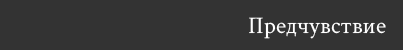
<style>
.page{position:relative;width:403px;height:50px;background:#333333}
.page>*{position:absolute;margin:0}
.t1{font:24px "CrimsonText-Regular";color:#ffffff}
</style>
<div class="page">
<p class="t1" style="left:249px;top:17px;width:137px;height:22px">Предчувствие</p>
</div>
